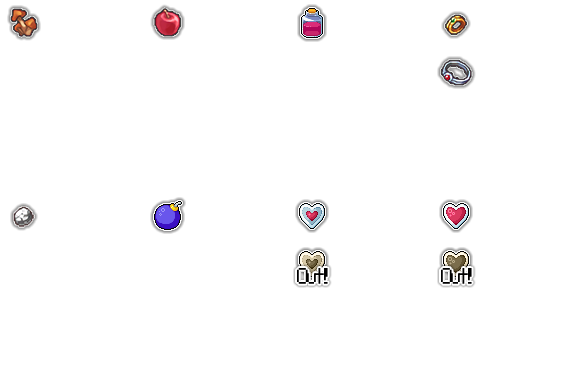
<style>
.page{position:relative;width:576px;height:384px;background:#ffffff}
.page>*{position:absolute;margin:0}
.t1{font:18px "ZeldaOracles";letter-spacing:-0.125em;color:#000000}
</style>
<div class="page">
<p class="t1" style="left:297px;top:267px;width:31px;height:17px">Out!</p>
<p class="t1" style="left:441px;top:267px;width:31px;height:17px">Out!</p>
</div>
